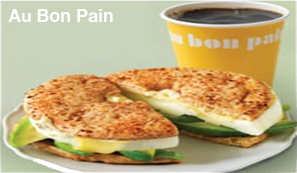
<style>
.page{position:relative;width:297px;height:173px}
.page>*{position:absolute;margin:0}
.t1{font:18px "HelveticaNeue-Bold";color:#ffffff}
</style>
<div class="page">
<p class="t1" style="left:8px;top:9px;width:105px;height:14px">Au Bon Pain</p>
</div>
